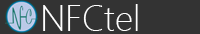
<style>
.page{position:relative;width:200px;height:34px;background:#333333}
.page>*{position:absolute;margin:0}
.t1{font:35.6px "SegoeUI-Light";color:#ffffff}
</style>
<div class="page">
<p class="t1" style="left:43px;top:4px;width:95px;height:27px">NFCtel</p>
</div>
